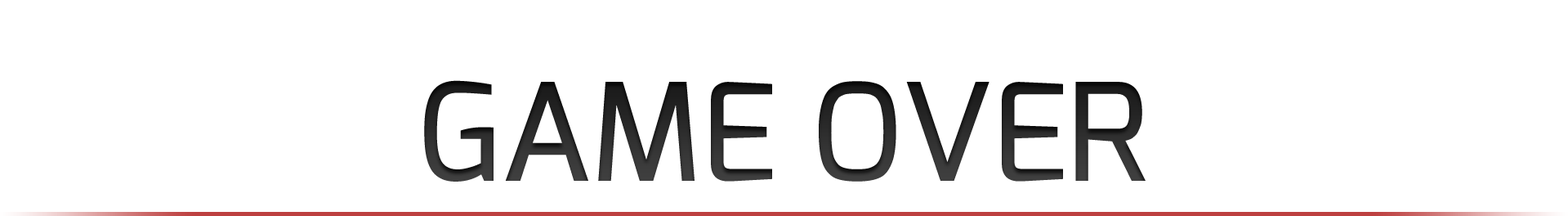
<style>
.page{position:relative;width:1568px;height:216px;background:#ffffff}
.page>*{position:absolute;margin:0}
.t1{font:134.5px "Exo-Medium";color:#272727;text-transform:uppercase}
</style>
<div class="page">
<p class="t1" style="left:424px;top:80px;width:722px;height:101px">Game Over</p>
</div>
